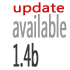
<style>
.page{position:relative;width:70px;height:70px;background:#ffffff}
.page>*{position:absolute;margin:0}
.t1{font:13px "SegoeUI";color:#d20f0f;font-weight:bold;scale:1.23 1}
.t2{font:30.9px "SegoeCondensed";color:#979797;font-weight:bold;scale:0.53 1}
.t3{font:30.9px "SegoeCondensed";color:#393737;font-weight:bold;scale:0.53 1}
</style>
<div class="page">
<p class="t1" style="left:13px;top:2px;width:51px;height:14px">update</p>
<p class="t2" style="left:12px;top:14px;width:55px;height:24px">available</p>
<p class="t3" style="left:13px;top:43px;width:26px;height:24px">1.4b</p>
</div>
